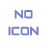
<style>
.page{position:relative;width:48px;height:48px;background:#ffffff}
.page>*{position:absolute;margin:0}
.t1{font:14px "ZeroTwos";color:#7782c6}
</style>
<div class="page">
<p class="t1" style="left:8px;top:10px;width:31px;height:26px;text-align:center">NO ICON</p>
</div>
